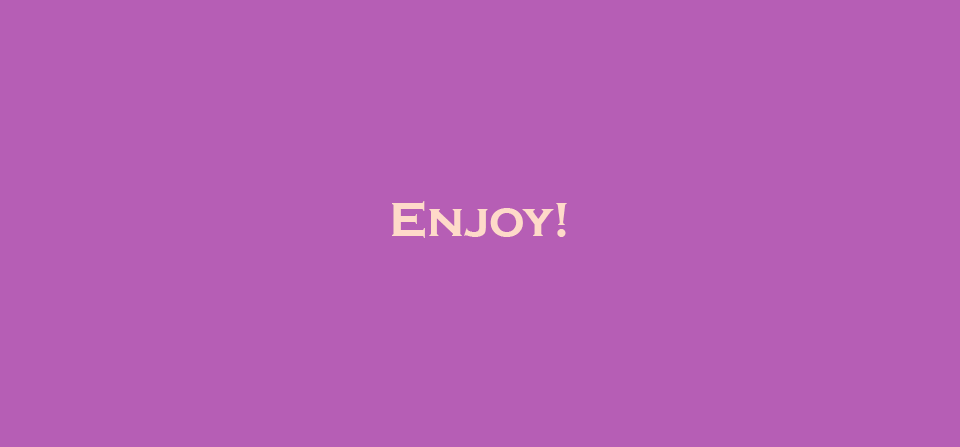
<style>
.page{position:relative;width:960px;height:447px;background:#b65eb5}
.page>*{position:absolute;margin:0}
.t1{font:50px "CopperplateGothic-Bold";color:#fedac9}
</style>
<div class="page">
<p class="t1" style="left:392px;top:201px;width:175px;height:37px">Enjoy!</p>
</div>
